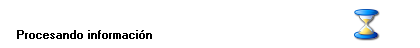
<style>
.page{position:relative;width:420px;height:48px;background:#ffffff}
.page>*{position:absolute;margin:0}
.t1{font:10.7px "MS Sans Serif";color:#000000;font-weight:bold}
</style>
<div class="page">
<p class="t1" style="left:17px;top:30px;width:135px;height:9px">Procesando información</p>
</div>
